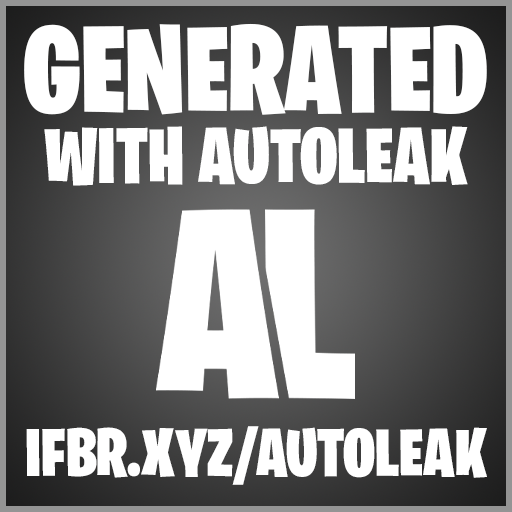
<style>
.page{position:relative;width:512px;height:512px;background:#ffffff}
.page>*{position:absolute;margin:0}
.t1{font:122.9px "BurbankBigCondensed-Black";color:#ffffff}
.t2{font:79px "BurbankBigCondensed-Black";color:#ffffff}
.t3{font:67.6px "BurbankBigCondensed-Black";color:#ffffff}
</style>
<div class="page">
<p class="t1" style="left:24px;top:23px;width:463px;height:92px">GENERATED</p>
<p class="t2" style="left:44px;top:126px;width:424px;height:60px">WITH AUTOLEAK</p>
<p class="t3" style="left:26px;top:426px;width:461px;height:59px">IFBR.XYZ/AUTOLEAK</p>
</div>
